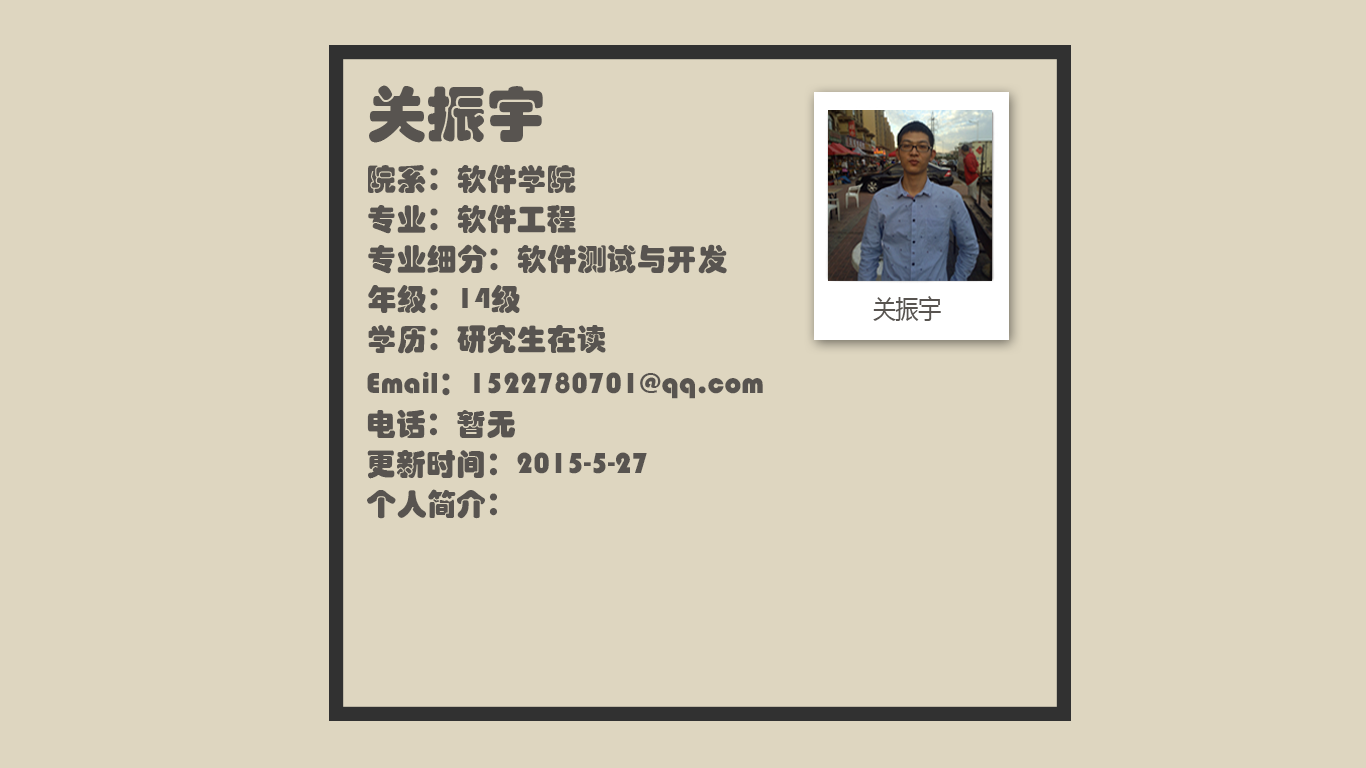
<style>
.page{position:relative;width:1366px;height:768px;background:#ded6c0}
.page>*{position:absolute;margin:0}
.t1{font:30px/40px "STHupo";color:#585450}
.t2{font:60px/40px "STHupo";color:#585450}
.t3{font:25.7px "MicrosoftYaHei";color:#585450;scale:0.88 1}
</style>
<div class="page">
<p class="t1" style="left:368px;top:85px;width:359px;height:269px"><span class="t2">关振宇<br></span><br>院系：软件学院<br>专业：软件工程<br>专业细分：软件测试与开发<br>年级：14级<br>学历：研究生在读<br>Email：1522780701@qq.com<br>电话：暂无<br>更新时间：2015-5-27</p>
<p class="t3" style="left:873px;top:296px;width:68px;height:25px">关振宇</p>
<p class="t1" style="left:367px;top:372px;width:396px;height:147px">Email：1522780701@qq.com<br>电话：暂无<br>更新时间：2015-5-27<br>个人简介：</p>
</div>
